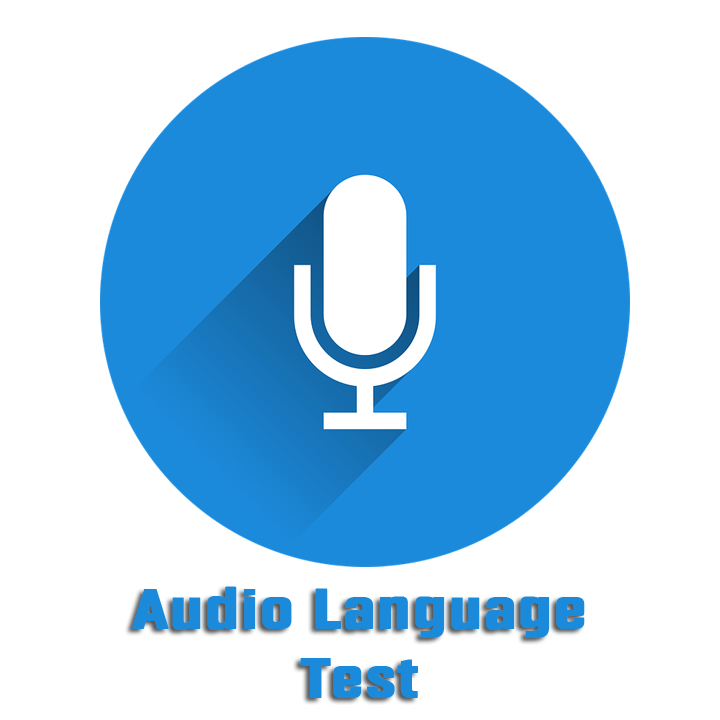
<style>
.page{position:relative;width:720px;height:720px;background:#ffffff}
.page>*{position:absolute;margin:0}
.t1{font:57.1px "Fragua-Bold";color:#1c8adb;font-weight:bold;scale:1.17 1}
</style>
<div class="page">
<p class="t1" style="left:132px;top:586px;width:453px;height:112px;text-align:center">Audio Language<br>Test</p>
</div>
